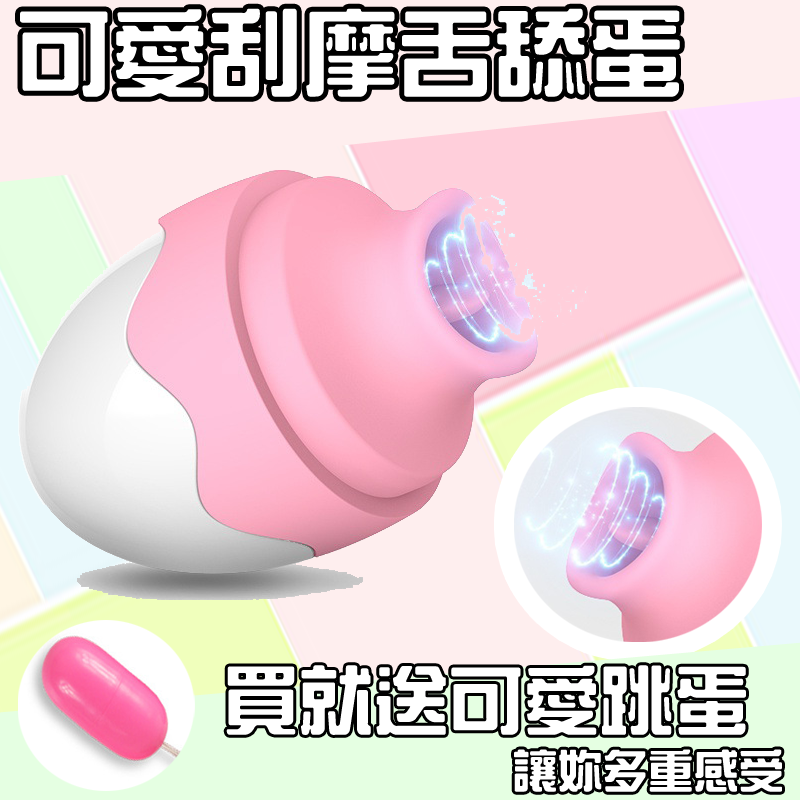
<style>
.page{position:relative;width:800px;height:800px}
.page>*{position:absolute;margin:0}
.t1{font:92.9px "HanWangZonYi";color:#ffffff;font-weight:bold}
.t2{font:73.2px "HanWangZonYi";color:#ffffff;font-weight:bold}
.t3{font:44.1px "HanWangZonYi";color:#ffffff;font-weight:bold}
</style>
<div class="page">
<p class="t1" style="left:20px;top:8px;width:660px;height:89px">可愛刮摩舌舔蛋</p>
<p class="t2" style="left:226px;top:665px;width:520px;height:70px">買就送可愛跳蛋</p>
<p class="t3" style="left:514px;top:749px;width:268px;height:43px">讓妳多重感受</p>
</div>
